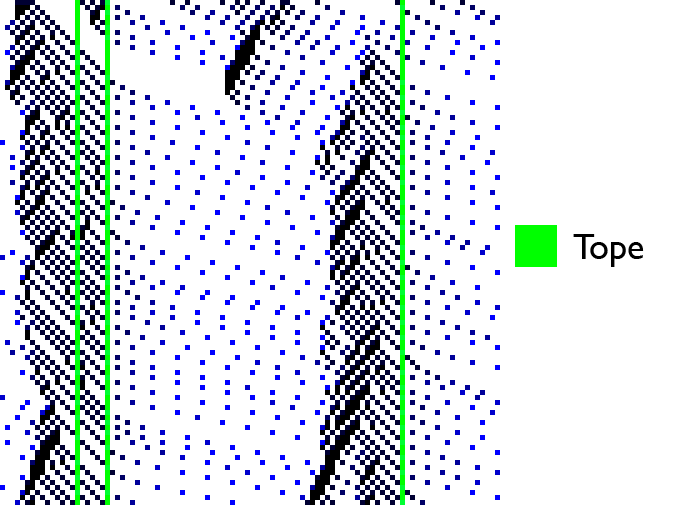
<style>
.page{position:relative;width:700px;height:505px;background:#ffffff}
.page>*{position:absolute;margin:0}
.t1{font:36px "GillSansMT";color:#000000}
</style>
<div class="page">
<p class="t1" style="left:573px;top:234px;width:71px;height:33px">Tope</p>
</div>
